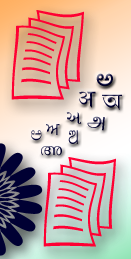
<style>
.page{position:relative;width:131px;height:259px}
.page>*{position:absolute;margin:0}
.t1{font:24.9px "Gautami";color:#000033}
.t2{font:24.9px "ArialUnicodeMS";color:#000033}
.t3{font:19.4px "ArialUnicodeMS";color:#000033}
.t4{font:19.4px "ArialUnicodeMS"}
</style>
<div class="page">
<p class="t1" style="left:96px;top:73px;width:17px;height:14px">అ</p>
<p class="t2" style="left:79px;top:91px;width:17px;height:17px">अ</p>
<p class="t2" style="left:102px;top:94px;width:20px;height:16px">অ</p>
<p class="t3" style="left:66px;top:112px;width:16px;height:12px">અ</p>
<p class="t4" style="left:46px;top:124px;width:14px;height:11px">ਅ</p>
<p class="t3" style="left:87px;top:116px;width:18px;height:15px">அ</p>
<p class="t3" style="left:31px;top:130px;width:11px;height:11px">ಅ</p>
<p class="t4" style="left:68px;top:130px;width:10px;height:14px">ଅ</p>
<p class="t3" style="left:41px;top:146px;width:21px;height:10px">അ</p>
</div>
